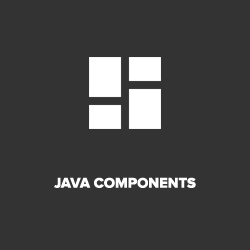
<style>
.page{position:relative;width:250px;height:250px;background:#333333}
.page>*{position:absolute;margin:0}
.t1{font:14.6px "ProximaNova-Extrabld";color:#fffefe}
</style>
<div class="page">
<p class="t1" style="left:54px;top:177px;width:142px;height:11px">JAVA COMPONENTS</p>
</div>
